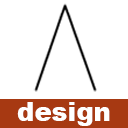
<style>
.page{position:relative;width:128px;height:128px;background:#ffffff}
.page>*{position:absolute;margin:0}
.t1{font:26px "Arial-Black";color:#ffffff}
</style>
<div class="page">
<p class="t1" style="left:17px;top:102px;width:93px;height:24px">design</p>
</div>
